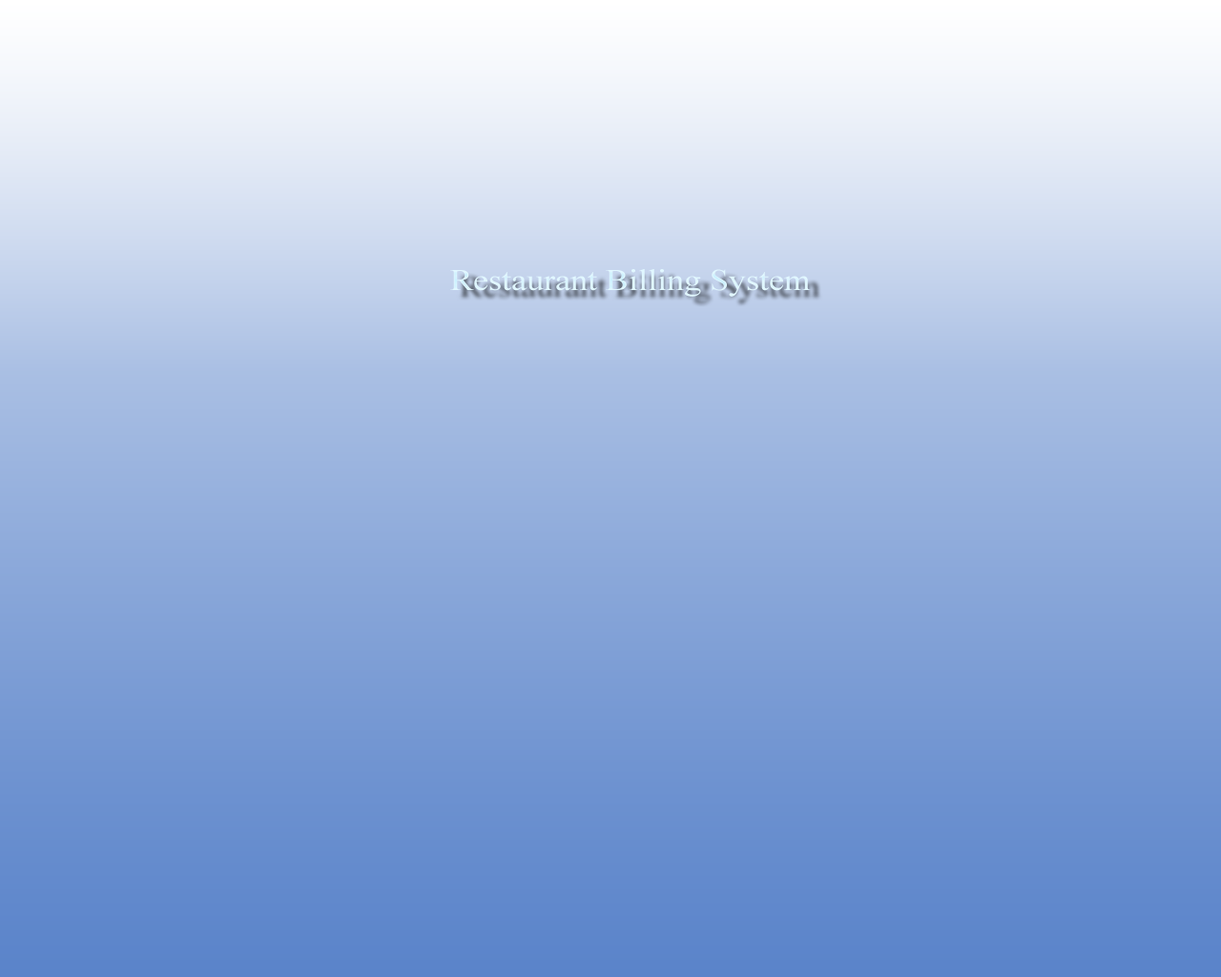
<style>
.page{position:relative;width:1221px;height:977px}
.page>*{position:absolute;margin:0}
.t1{font:30.2px "TimesNewRomanPSMT";color:#e1f7ff;scale:1.14 1}
</style>
<div class="page">
<p class="t1" style="left:450px;top:269px;width:361px;height:28px">Restaurant Billing System</p>
</div>
